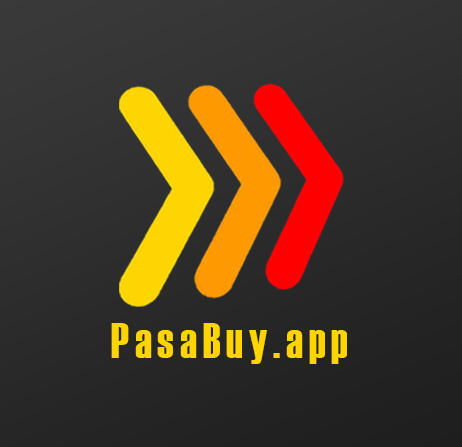
<style>
.page{position:relative;width:462px;height:447px}
.page>*{position:absolute;margin:0}
.t1{font:48.7px "Haettenschweiler";letter-spacing:0.12em;color:#fed500}
</style>
<div class="page">
<p class="t1" style="left:111px;top:323px;width:236px;height:41px">PasaBuy.app</p>
<p class="t1" style="left:111px;top:323px;width:236px;height:41px">PasaBuy.app</p>
</div>
